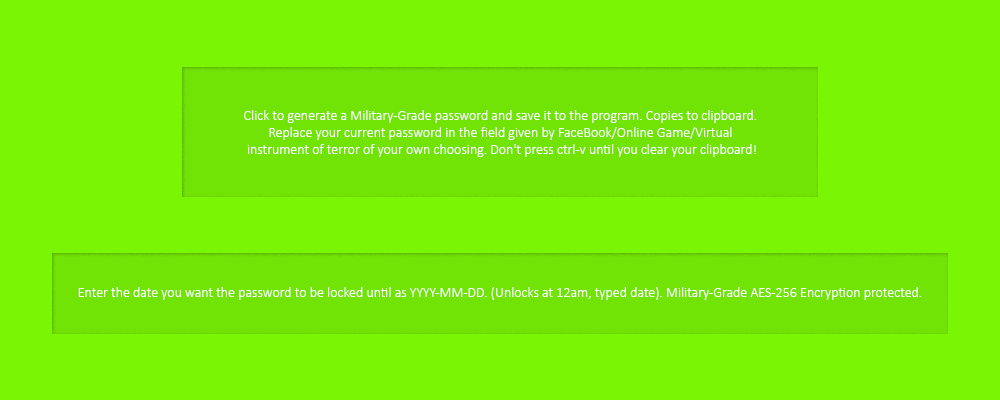
<style>
.page{position:relative;width:1000px;height:400px;background:#7af504}
.page>*{position:absolute;margin:0}
.t1{font:14px "Calibri-Light";color:#fefefe}
</style>
<div class="page">
<p class="t1" style="left:244px;top:110px;width:513px;height:47px;text-align:center">Click to generate a Military-Grade password and save it to the program. Copies to clipboard. <br>Replace your current password in the field given by FaceBook/Online Game/Virtual <br>instrument of terror of your own choosing. Don't press ctrl-v until you clear your clipboard!</p>
<p class="t1" style="left:78px;top:287px;width:844px;height:13px">Enter the date you want the password to be locked until as YYYY-MM-DD. (Unlocks at 12am, typed date). Military-Grade AES-256 Encryption protected.</p>
</div>
